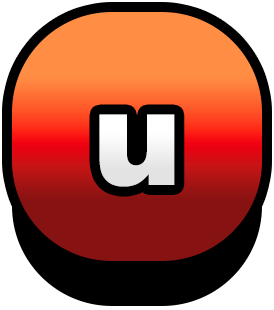
<style>
.page{position:relative;width:274px;height:310px;background:#000000}
.page>*{position:absolute;margin:0}
.t1{font:135.7px "Arial-Black";color:#f0f0f0}
</style>
<div class="page">
<p class="t1" style="left:99px;top:114px;width:76px;height:73px">u</p>
</div>
